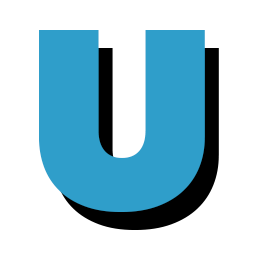
<style>
.page{position:relative;width:256px;height:256px;background:#ffffff}
.page>*{position:absolute;margin:0}
.t1{font:250px "AvenirNext-Heavy";color:#2f9eca}
</style>
<div class="page">
<p class="t1" style="left:39px;top:30px;width:166px;height:182px">U</p>
</div>
